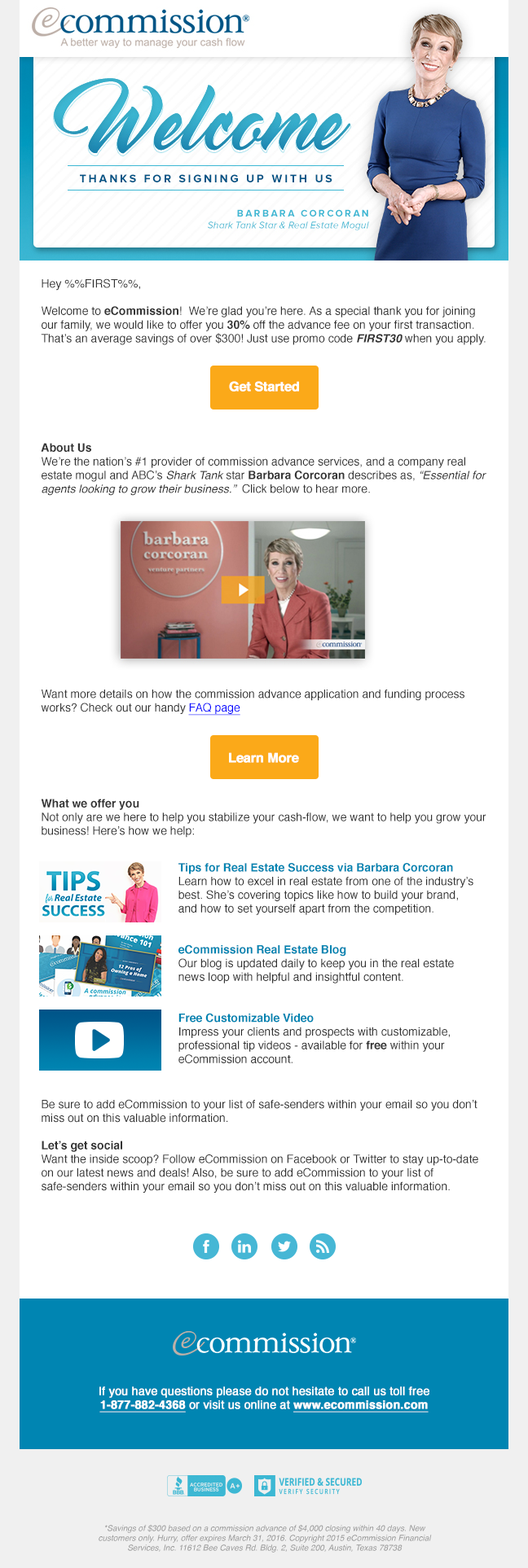
<style>
.page{position:relative;width:528px;height:1568px;background:#ffffff}
.page>*{position:absolute;margin:0}
.t1{font:11.4px "Helvetica";color:#333333}
.t2{font:11.4px "Helvetica-Bold";color:#333333}
.t3{font:11.4px "Helvetica-BoldOblique";color:#333333}
.t4{font:11.4px "Helvetica-Oblique";color:#333333}
.t5{font:11.4px "Helvetica";color:#0000ff;text-decoration:underline}
.t6{font:13px "Helvetica-Bold";letter-spacing:-0.025em;color:#ffffff;font-weight:bold}
.t7{font:11.4px "Helvetica-Bold";color:#0085b2}
.t8{font:11.4px "Helvetica";color:#ffffff;font-weight:bold}
.t9{font:11.4px "Helvetica-Bold";color:#ffffff;font-weight:bold;text-decoration:underline}
.t10{font:8.1px "Helvetica-Oblique";color:#999999}
</style>
<div class="page">
<p class="t1" style="left:41px;top:278px;width:445px;height:915px">Hey %%FIRST%%,<br><br>Welcome to <span class="t2">eCommission</span>!  We’re glad you’re here. As a special thank you for joining our family, we would like to offer you <span class="t2">30%</span> off the advance fee on your first transaction. That’s an average savings of over $300! Just use promo code <span class="t3">FIRST30</span> when you apply.<br><br><br><br><br><br><br><br><span class="t2">About Us<br></span>We’re the nation’s #1 provider of commission advance services, and a company real estate mogul and ABC’s <span class="t4">Shark Tank</span> star <span class="t2">Barbara Corcoran</span> describes as, <span class="t4">“Essential for agents looking to grow their business.”</span>  Click below to hear more.<br><br><br><br><br><br><br><br><br><br><br><br><br><br><br>Want more details on how the commission advance application and funding process works? Check out our handy <span class="t5">FAQ page<br><br><br><br><br><br><br></span><span class="t2">What we offer you</span><br>Not only are we here to help you stabilize your cash-flow, we want to help you grow your business! Here’s how we help:<br><br><br><br><br><br><br><br><br><br><br><br><br><br><br><br><br><br><br><br>Be sure to add eCommission to your list of safe-senders within your email so you don’t miss out on this valuable information.<br><br><span class="t2">Let’s get social<br></span>Want the inside scoop? Follow eCommission on Facebook or Twitter to stay up-to-date on our latest news and deals! Also, be sure to add eCommission to your list of safe-senders within your email so you don’t miss out on this valuable information.</p>
<p class="t6" style="left:229px;top:381px;width:70px;height:11px">Get Started</p>
<p class="t6" style="left:229px;top:752px;width:70px;height:11px">Learn More</p>
<p class="t1" style="left:178px;top:863px;width:295px;height:200px"><span class="t7">Tips for Real Estate Success via Barbara Corcoran<br></span>Learn how to excel in real estate from one of the industry’s best. She’s covering topics like how to build your brand, and how to set yourself apart from the competition. <br> <br><br><span class="t7">eCommission Real Estate Blog<br></span>Our blog is updated daily to keep you in the real estate news loop with helpful and insightful content.<br> <br><br><span class="t7">Free Customizable Video<br></span>Impress your clients and prospects with customizable, professional tip videos - available for <span class="t2">free</span> within your eCommission account.</p>
<p class="t8" style="left:99px;top:1386px;width:330px;height:27px;text-align:center">If you have questions please do not hesitate to call us toll free<br><span class="t9">1‑877‑882‑4368</span> or visit us online at <span class="t9">www.ecommission.com</span></p>
<p class="t10" style="left:99px;top:1524px;width:332px;height:29px;text-align:center">*Savings of $300 based on a commission advance of $4,000 closing within 40 days. New customers only. Hurry, offer expires March 31, 2016. Copyright 2015 eCommission Financial Services, Inc. 11612 Bee Caves Rd. Bldg. 2, Suite 200, Austin, Texas 78738</p>
</div>
